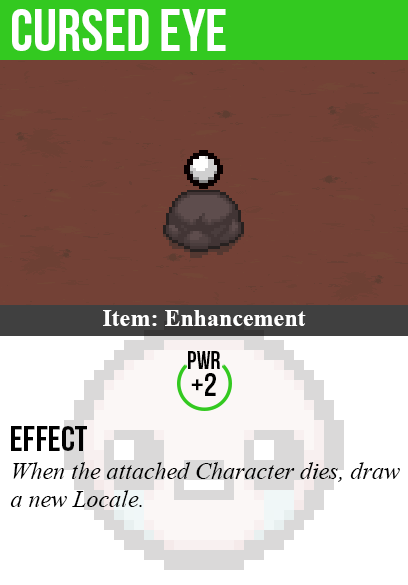
<style>
.page{position:relative;width:408px;height:585px;background:#734136}
.page>*{position:absolute;margin:0}
.t1{font:60px "BebasNeue";color:#ffffff}
.t2{font:24px "TimesNewRomanPS-BoldMT";color:#ffffff}
.t3{font:25px "BebasNeue";color:#000000}
.t4{font:32px "BebasNeue";color:#000000}
.t5{font:36px "BebasNeue";color:#000000}
.t6{font:24px "TimesNewRomanPS-ItalicMT";color:#000000}
</style>
<div class="page">
<p class="t1" style="left:12px;top:9px;width:214px;height:42px">cursed eye</p>
<p class="t2" style="left:103px;top:310px;width:203px;height:16px">Item: Enhancement</p>
<p class="t3" style="left:188px;top:351px;width:32px;height:18px">pwr</p>
<p class="t4" style="left:191px;top:373px;width:25px;height:23px">+2</p>
<p class="t5" style="left:11px;top:426px;width:76px;height:25px">Effect</p>
<p class="t6" style="left:10px;top:462px;width:390px;height:45px">When the attached Character dies, draw<br>a new Locale.</p>
</div>
